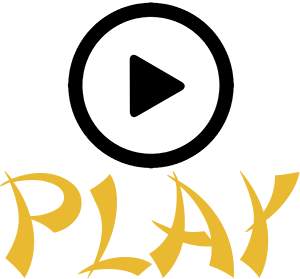
<style>
.page{position:relative;width:300px;height:279px;background:#ffffff}
.page>*{position:absolute;margin:0}
.t1{font:150px "Shanghai";color:#e9ba31}
</style>
<div class="page">
<p class="t1" style="left:0px;top:171px;width:300px;height:107px">PLAy</p>
</div>
